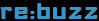
<style>
.page{position:relative;width:99px;height:21px;background:#000000}
.page>*{position:absolute;margin:0}
.t1{font:20.7px "BabyUniverse";letter-spacing:0.1em;color:#3399cc}
</style>
<div class="page">
<p class="t1" style="left:0px;top:3px;width:98px;height:16px">re:buzz</p>
</div>
